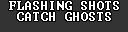
<style>
.page{position:relative;width:128px;height:32px;background:#333333}
.page>*{position:absolute;margin:0}
.t1{font:12px "Terminal";color:#ffffff}
</style>
<div class="page">
<p class="t1" style="left:9px;top:1px;width:110px;height:9px">FLASHING SHOTS</p>
<p class="t1" style="left:17px;top:12px;width:94px;height:9px">CATCH GHOSTS</p>
</div>
